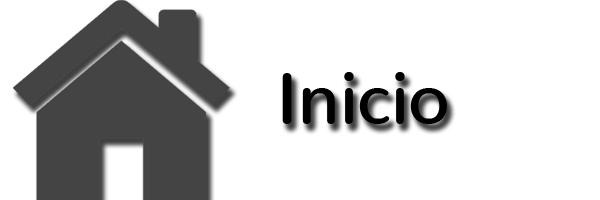
<style>
.page{position:relative;width:600px;height:200px;background:#ffffff}
.page>*{position:absolute;margin:0}
.t1{font:72px "Nunito-SemiBold";color:#000000}
</style>
<div class="page">
<p class="t1" style="left:282px;top:72px;width:165px;height:52px">Inicio</p>
</div>
